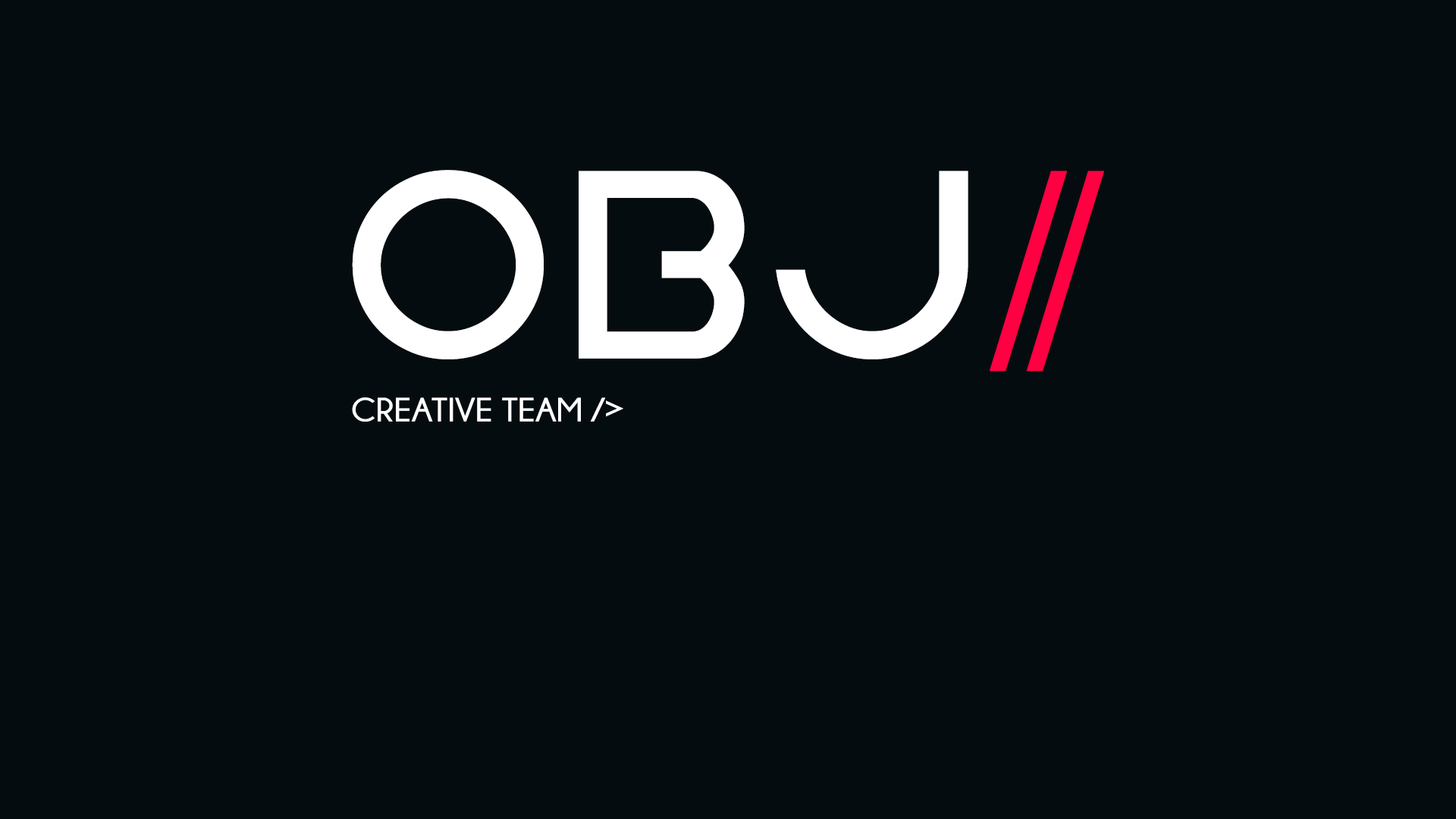
<style>
.page{position:relative;width:1456px;height:819px;background:#050c10}
.page>*{position:absolute;margin:0}
.t1{font:300.1px "EarthOrbiterBold";color:#ffffff}
.t2{font:281.8px "MinionPro-Regular";letter-spacing:-0.2em;color:#ff0042}
.t3{font:33.7px "Champagne&Limousines-Bold";color:#ffffff;scale:1.06 1}
</style>
<div class="page">
<p class="t1" style="left:352px;top:170px;width:752px;height:202px">OBJ<span class="t2">//</span></p>
<p class="t3" style="left:352px;top:397px;width:271px;height:25px">CREATIVE TEAM /&gt;</p>
</div>
